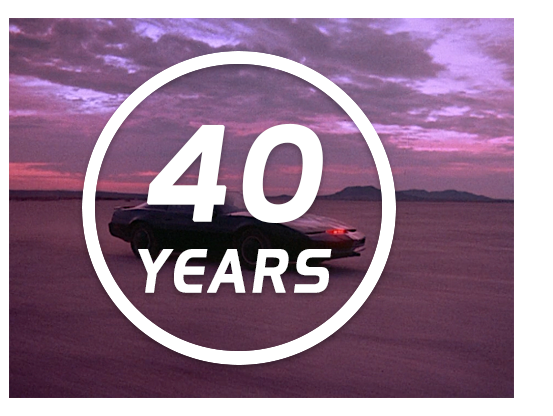
<style>
.page{position:relative;width:553px;height:416px;background:#ffffff}
.page>*{position:absolute;margin:0}
.t1{font:60px/72px "HandelGothic";letter-spacing:0.095em;color:#ffffff;text-transform:uppercase;font-weight:bold;font-style:italic;scale:0.8 1}
.t2{font:130px/72px "HandelGothic";letter-spacing:0.095em;color:#ffffff;text-transform:uppercase;font-weight:bold;font-style:italic;scale:0.8 1}
</style>
<div class="page">
<p class="t1" style="left:138px;top:123px;width:194px;height:170px;text-align:center"><span class="t2">40<br></span>Years</p>
</div>
